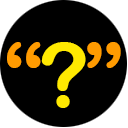
<style>
.page{position:relative;width:128px;height:128px;background:#000000}
.page>*{position:absolute;margin:0}
.t1{font:89px "ArialRoundedMTBold";letter-spacing:-0.06em;color:#ff9c01}
.t2{font:89px "ArialRoundedMTBold";letter-spacing:-0.06em;color:#ffea01}
</style>
<div class="page">
<p class="t1" style="left:7px;top:42px;width:114px;height:66px">“<span class="t2">?</span>”</p>
</div>
